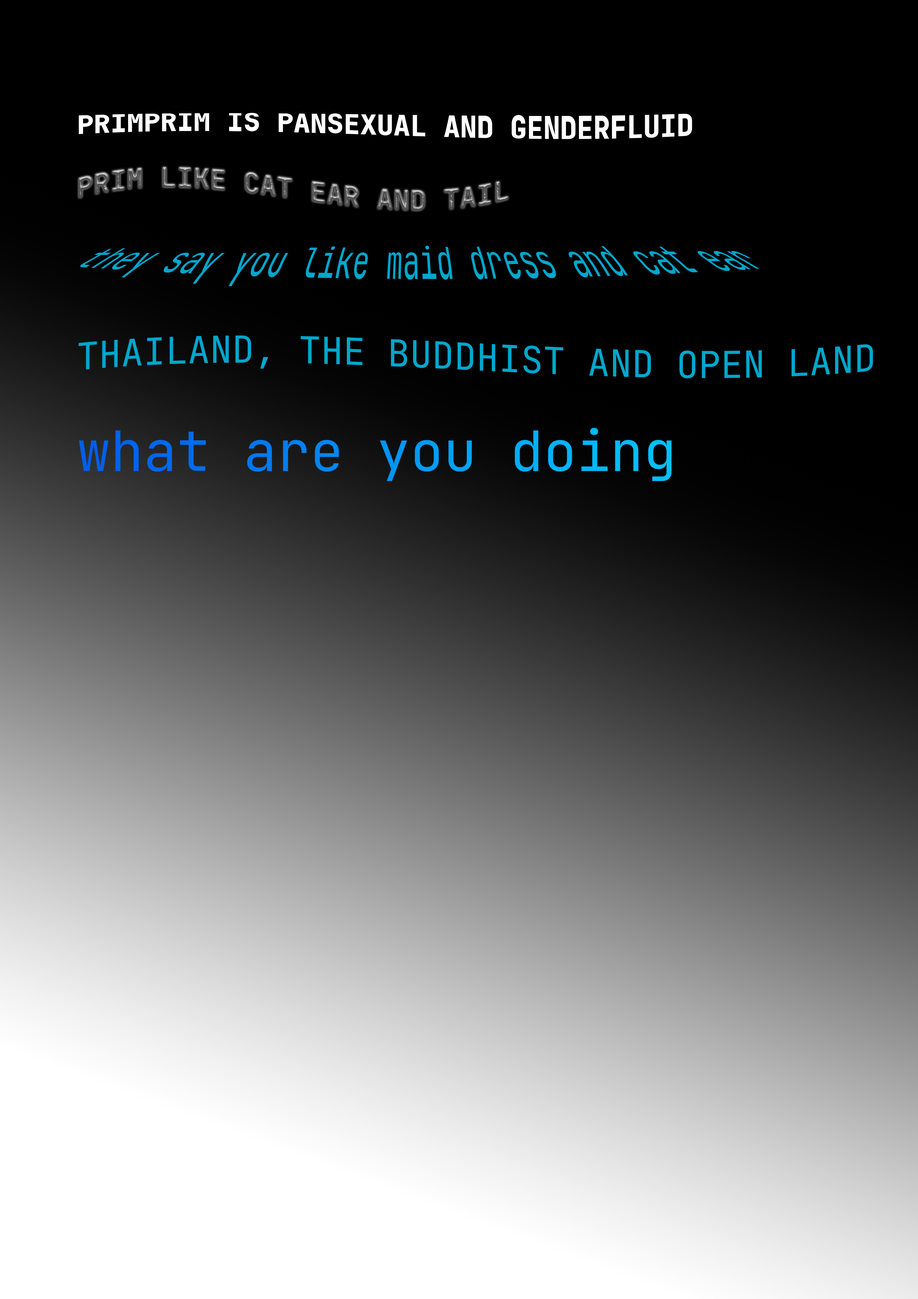
<style>
.page{position:relative;width:918px;height:1299px;background:#000000}
.page>*{position:absolute;margin:0}
.t1{font:27.8px "JetBrainsMonoRoman-ExtraBold";color:#ffffff}
.t2{font:27.8px "JetBrainsMonoRoman-Bold"}
.t3{font:27.8px "JetBrainsMono-Regular";color:#00a7cc}
.t4{font:37px "JetBrainsMono-Regular";color:#00a7cc}
</style>
<div class="page">
<p class="t1" style="left:78px;top:113px;width:614px;height:26px">PRIMPRIM IS PANSEXUAL AND GENDERFLUID</p>
<p class="t2" style="left:78px;top:167px;width:430px;height:44px">PRIM LIKE CAT EAR AND TAIL</p>
<p class="t3" style="left:80px;top:245px;width:680px;height:42px">they say you like maid dress and cat ear</p>
<p class="t4" style="left:78px;top:335px;width:795px;height:43px">THAILAND, THE BUDDHIST AND OPEN LAND</p>
</div>
